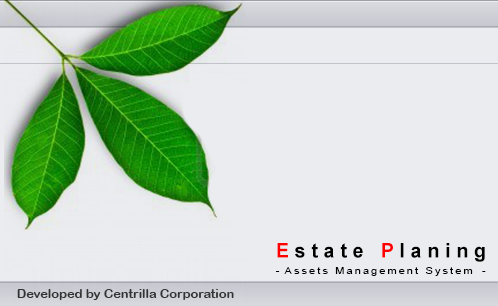
<style>
.page{position:relative;width:498px;height:306px;background:#ebecef}
.page>*{position:absolute;margin:0}
.t1{font:20.3px "Arial-BoldMT";letter-spacing:0.3em;color:#000000;scale:0.96 1}
.t2{font:20.3px "Arial-BoldMT";letter-spacing:0.3em;color:#ff0000;scale:0.96 1}
.t3{font:10px "ArialMT";letter-spacing:0.21em;color:#000000;scale:1.07 1}
.t4{font:11.8px "ArialRoundedMTBold";color:#333333;scale:1.08 1}
</style>
<div class="page">
<p class="t1" style="left:277px;top:243px;width:208px;height:19px"><span class="t2">E</span>state <span class="t2">P</span>laning</p>
<p class="t3" style="left:276px;top:267px;width:210px;height:9px">- Assets Management System -</p>
<p class="t4" style="left:17px;top:289px;width:217px;height:11px">Developed by Centrilla Corporation</p>
</div>
